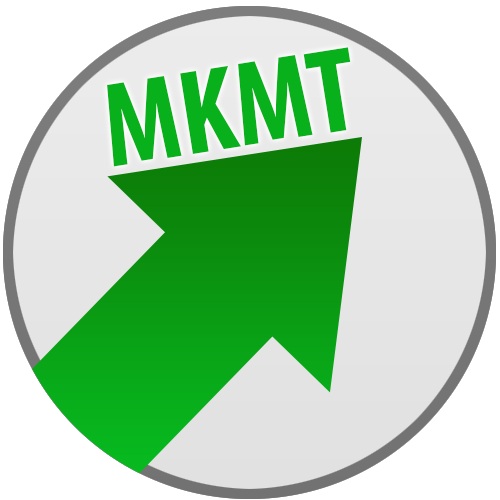
<style>
.page{position:relative;width:500px;height:500px;background:#ffffff}
.page>*{position:absolute;margin:0}
.t1{font:120.8px "MyriadPro-BoldCond";color:#08b11c}
</style>
<div class="page">
<p class="t1" style="left:107px;top:47px;width:244px;height:120px;rotate:-9deg">MKMT</p>
</div>
